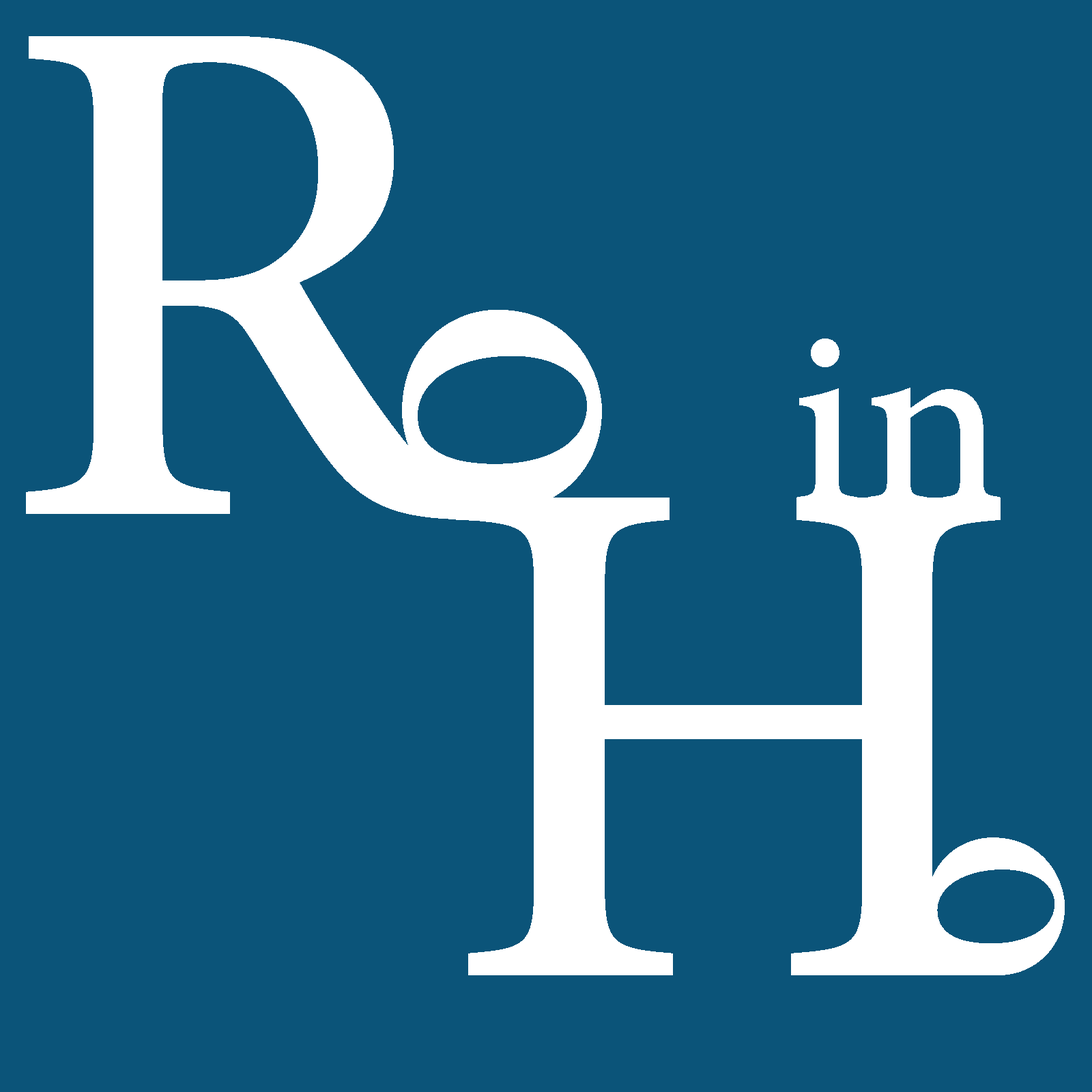
<style>
.page{position:relative;width:1092px;height:1092px;background:#0b5479}
.page>*{position:absolute;margin:0}
.t1{font:1028.9px "AdobeArabic-Regular";color:#ffffff}
.t2{font:609.1px "AdobeArabic-Regular";color:#ffffff}
.t3{font:359.4px "AdobeArabic-Regular";color:#ffffff}
.t4{font:420.1px "AdobeArabic-Regular";color:#ffffff}
</style>
<div class="page">
<p class="t1" style="left:26px;top:36px;width:453px;height:485px">R</p>
<p class="t2" style="left:402px;top:310px;width:200px;height:200px;rotate:90deg">o</p>
<p class="t3" style="left:797px;top:339px;width:203px;height:165px">in</p>
<p class="t1" style="left:466px;top:498px;width:535px;height:477px">H</p>
<p class="t4" style="left:927px;top:837px;width:138px;height:138px;rotate:90deg">o</p>
</div>
